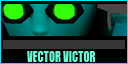
<style>
.page{position:relative;width:128px;height:64px;background:#000000}
.page>*{position:absolute;margin:0}
.t1{font:14px "Impact";color:#6bf9d8;scale:0.8 1}
</style>
<div class="page">
<p class="t1" style="left:27px;top:51px;width:68px;height:11px">VECTOR VICTOR</p>
</div>
